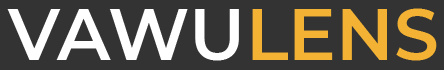
<style>
.page{position:relative;width:444px;height:70px;background:#333333}
.page>*{position:absolute;margin:0}
.t1{font:71.2px "Montserrat-SemiBold";color:#ffffff}
.t2{font:71.2px "Montserrat-SemiBold";color:#f3b233}
</style>
<div class="page">
<p class="t1" style="left:7px;top:8px;width:430px;height:53px">VAWU<span class="t2">LENS</span></p>
</div>
